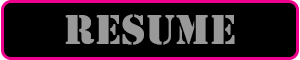
<style>
.page{position:relative;width:300px;height:60px;background:#000000}
.page>*{position:absolute;margin:0}
.t1{font:43.2px "Stencil";color:#999999}
</style>
<div class="page">
<p class="t1" style="left:65px;top:14px;width:170px;height:31px">resume</p>
</div>
